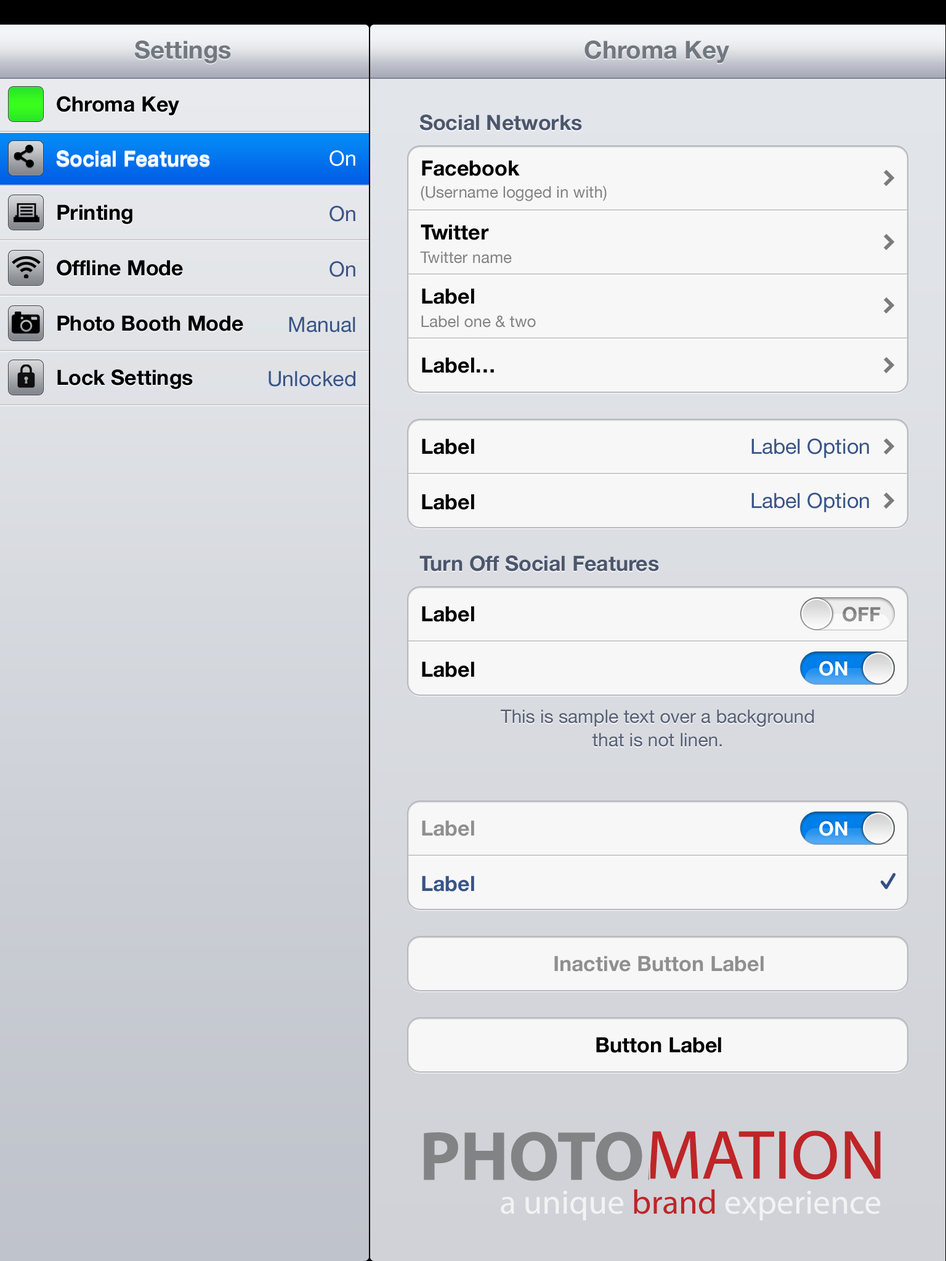
<style>
.page{position:relative;width:946px;height:1261px;background:#f7f7f7}
.page>*{position:absolute;margin:0}
.t1{font:24.6px "HelveticaNeue-Bold";color:#717880}
.t2{font:20.9px "HelveticaNeue-Bold";color:#000000}
.t3{font:20.9px "HelveticaNeue-Bold";color:#4c566c}
.t4{font:20.9px "HelveticaNeue-Bold";color:#ffffff}
.t5{font:20.9px "HelveticaNeue";color:#ffffff}
.t6{font:16px "HelveticaNeue";color:#838383}
.t7{font:20.9px "HelveticaNeue";color:#385487}
.t8{font:19.7px "HelveticaNeue-Bold";color:#7f7f7f}
.t9{font:19.7px "HelveticaNeue-Bold";color:#ffffff}
.t10{font:18.5px/23.4px "HelveticaNeue";color:#576075}
.t11{font:20.9px "HelveticaNeue-Bold";color:#8f8f8f}
.t12{font:20.9px "HelveticaNeue-Bold";color:#385487}
</style>
<div class="page">
<p class="t1" style="left:135px;top:40px;width:96px;height:23px">Settings</p>
<p class="t1" style="left:584px;top:40px;width:145px;height:23px">Chroma Key</p>
<p class="t2" style="left:57px;top:96px;width:122px;height:20px">Chroma Key</p>
<p class="t3" style="left:419px;top:115px;width:163px;height:16px">Social Networks</p>
<p class="t4" style="left:56px;top:150px;width:154px;height:16px">Social Features</p>
<p class="t5" style="left:329px;top:150px;width:26px;height:16px">On</p>
<p class="t2" style="left:422px;top:160px;width:98px;height:16px">Facebook</p>
<p class="t6" style="left:421px;top:186px;width:185px;height:15px">(Username logged in with)</p>
<p class="t2" style="left:57px;top:204px;width:75px;height:20px">Printing</p>
<p class="t7" style="left:329px;top:206px;width:26px;height:16px">On</p>
<p class="t2" style="left:421px;top:224px;width:68px;height:16px">Twitter</p>
<p class="t6" style="left:420px;top:251px;width:92px;height:13px">Twitter name</p>
<p class="t2" style="left:57px;top:260px;width:126px;height:16px">Offline Mode</p>
<p class="t7" style="left:329px;top:261px;width:26px;height:16px">On</p>
<p class="t2" style="left:422px;top:288px;width:52px;height:16px">Label</p>
<p class="t2" style="left:57px;top:315px;width:186px;height:16px">Photo Booth Mode</p>
<p class="t7" style="left:289px;top:316px;width:66px;height:16px">Manual</p>
<p class="t6" style="left:421px;top:315px;width:115px;height:13px">Label one &amp; two</p>
<p class="t2" style="left:422px;top:357px;width:72px;height:16px">Label…</p>
<p class="t2" style="left:57px;top:369px;width:136px;height:20px">Lock Settings</p>
<p class="t7" style="left:268px;top:371px;width:87px;height:16px">Unlocked</p>
<p class="t2" style="left:422px;top:438px;width:52px;height:16px">Label</p>
<p class="t7" style="left:751px;top:438px;width:118px;height:20px">Label Option</p>
<p class="t2" style="left:422px;top:494px;width:52px;height:16px">Label</p>
<p class="t7" style="left:751px;top:493px;width:118px;height:19px">Label Option</p>
<p class="t3" style="left:419px;top:555px;width:240px;height:16px">Turn Off Social Features</p>
<p class="t2" style="left:422px;top:606px;width:52px;height:16px">Label</p>
<p class="t8" style="left:842px;top:606px;width:38px;height:16px">OFF</p>
<p class="t2" style="left:422px;top:661px;width:52px;height:16px">Label</p>
<p class="t9" style="left:819px;top:661px;width:28px;height:15px">ON</p>
<p class="t10" style="left:501px;top:709px;width:313px;height:38px;text-align:center">This is sample text over a background<br>that is not linen.</p>
<p class="t11" style="left:422px;top:820px;width:52px;height:16px">Label</p>
<p class="t9" style="left:819px;top:821px;width:28px;height:15px">ON</p>
<p class="t12" style="left:422px;top:875px;width:52px;height:17px">Label</p>
<p class="t11" style="left:554px;top:956px;width:209px;height:16px">Inactive Button Label</p>
<p class="t2" style="left:596px;top:1037px;width:125px;height:16px">Button Label</p>
</div>
